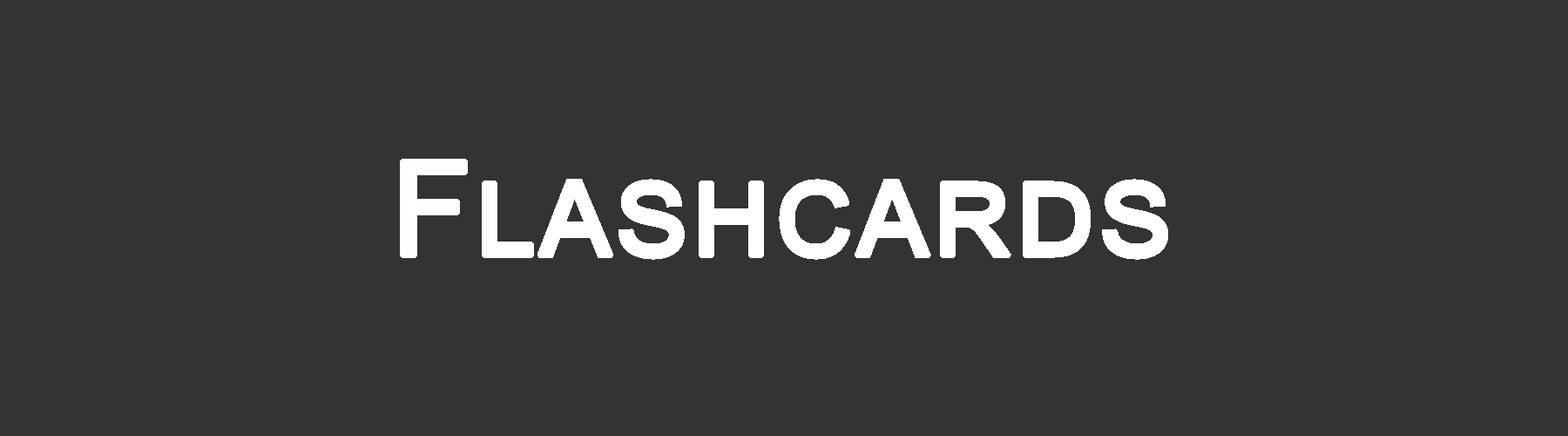
<style>
.page{position:relative;width:1568px;height:436px;background:#333333}
.page>*{position:absolute;margin:0}
.t1{font:130.7px "ArialMT";color:#ffffff;font-variant:small-caps;font-weight:bold}
</style>
<div class="page">
<p class="t1" style="left:400px;top:159px;width:768px;height:101px">Flashcards</p>
</div>
